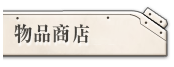
<style>
.page{position:relative;width:174px;height:67px;background:#ffffff}
.page>*{position:absolute;margin:0}
.t1{font:20px "RyuminPr6N-ExBold";letter-spacing:0.075em;color:#4a4641;scale:0.9 1}
</style>
<div class="page">
<p class="t1" style="left:14px;top:23px;width:76px;height:21px">物品商店</p>
</div>
